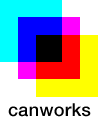
<style>
.page{position:relative;width:98px;height:117px;background:#ffffff}
.page>*{position:absolute;margin:0}
.t1{font:18px "HelveticaNeue-Medium";letter-spacing:0.02em;color:#000000}
</style>
<div class="page">
<p class="t1" style="left:8px;top:103px;width:83px;height:14px">canworks</p>
</div>
